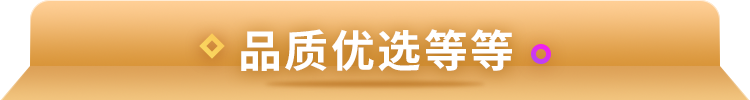
<style>
.page{position:relative;width:750px;height:100px}
.page>*{position:absolute;margin:0}
.t1{font:44px "SourceHanSansCN-Bold";letter-spacing:0.055em;color:#ffffff}
</style>
<div class="page">
<p class="t1" style="left:241px;top:29px;width:271px;height:43px">品质优选等等</p>
</div>
